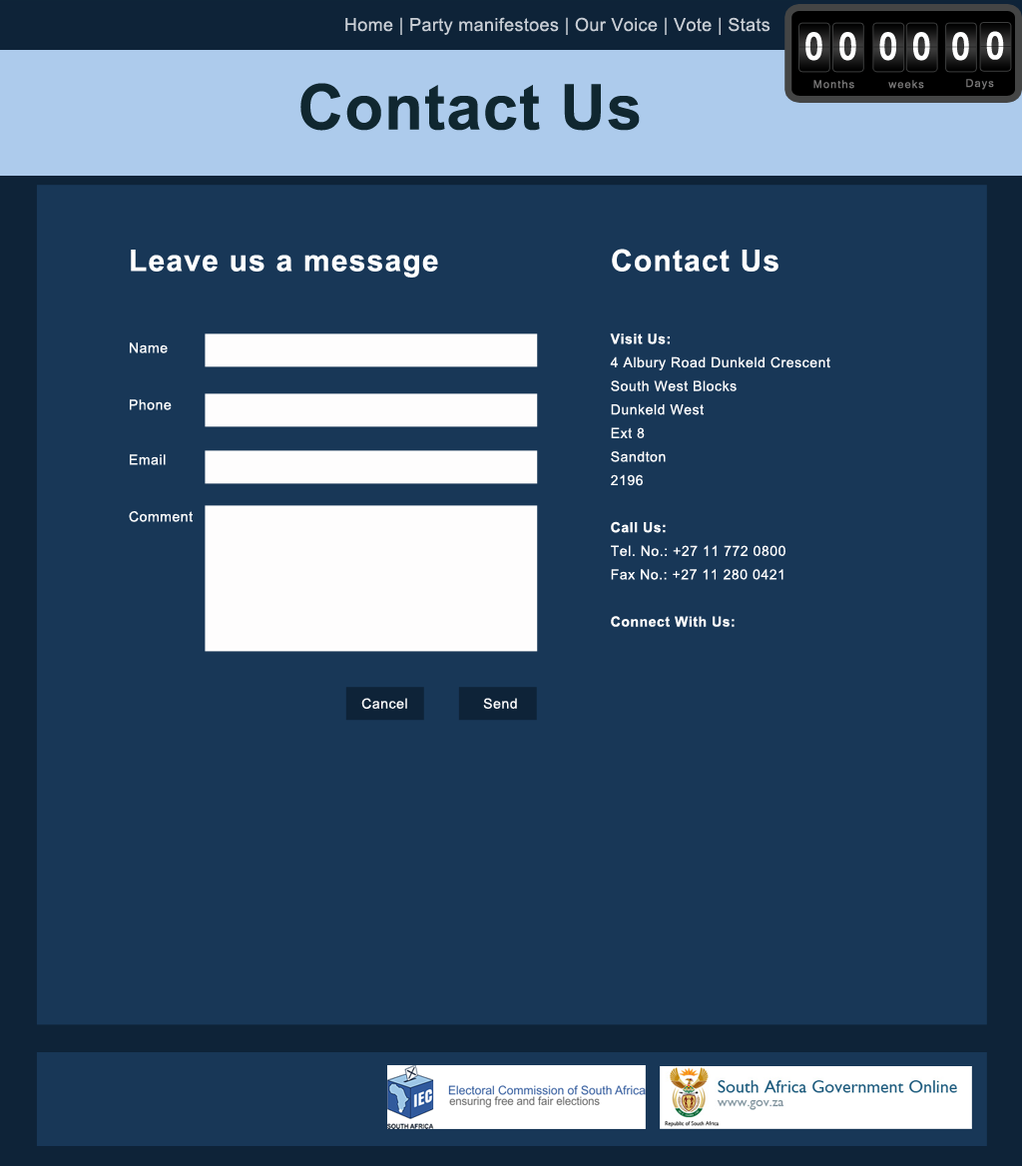
<style>
.page{position:relative;width:1022px;height:1166px;background:#183757}
.page>*{position:absolute;margin:0}
.t1{font:18px "ArialMT";letter-spacing:0.02em;color:#c9ced5}
.t2{font:37.6px "Kartika-Bold";letter-spacing:0.105em;color:#ffffff;scale:0.88 1}
.t3{font:63.1px "Arial-BoldMT";letter-spacing:0.02em;color:#102730}
.t4{font:10.5px "Kartika";letter-spacing:0.105em;color:#777676}
.t5{font:30px "Arial-BoldMT";letter-spacing:0.04em;color:#ffffff}
.t6{font:14px/23.6px "ArialMT";letter-spacing:0.04em;color:#fefdfd}
.t7{font:14px/23.6px "Arial-BoldMT";letter-spacing:0.04em;color:#fefdfd}
.t8{font:14px "ArialMT";letter-spacing:0.04em;color:#ffffff}
.t9{font:14px "ArialMT";letter-spacing:0.04em;color:#fefdfd}
</style>
<div class="page">
<p class="t1" style="left:345px;top:17px;width:426px;height:18px">Home | Party manifestoes | Our Voice | Vote | Stats</p>
<p class="t2" style="left:806px;top:32px;width:17px;height:29px">0</p>
<p class="t2" style="left:840px;top:32px;width:17px;height:29px">0</p>
<p class="t2" style="left:880px;top:32px;width:17px;height:29px">0</p>
<p class="t2" style="left:914px;top:32px;width:17px;height:29px">0</p>
<p class="t2" style="left:953px;top:32px;width:17px;height:29px">0</p>
<p class="t2" style="left:987px;top:31px;width:17px;height:29px">0</p>
<p class="t3" style="left:301px;top:83px;width:339px;height:48px">Contact Us</p>
<p class="t4" style="left:814px;top:80px;width:41px;height:9px">Months</p>
<p class="t4" style="left:889px;top:80px;width:36px;height:9px">weeks</p>
<p class="t4" style="left:967px;top:79px;width:28px;height:11px">Days</p>
<p class="t5" style="left:131px;top:250px;width:307px;height:28px">Leave us a message</p>
<p class="t5" style="left:612px;top:249px;width:167px;height:23px">Contact Us</p>
<p class="t6" style="left:610px;top:333px;width:221px;height:294px"><span class="t7">Visit Us:<br></span>4 Albury Road Dunkeld Crescent<br>South West Blocks<br>Dunkeld West<br>Ext 8<br>Sandton<br>2196<br><br><span class="t7">Call Us:<br></span>Tel. No.: +27 11 772 0800<br>Fax No.: +27 11 280 0421<br><br><span class="t7">Connect With Us:</span></p>
<p class="t8" style="left:130px;top:342px;width:38px;height:11px">Name</p>
<p class="t8" style="left:130px;top:399px;width:42px;height:11px">Phone</p>
<p class="t8" style="left:130px;top:454px;width:36px;height:11px">Email</p>
<p class="t8" style="left:129px;top:511px;width:64px;height:11px">Comment</p>
<p class="t9" style="left:361px;top:698px;width:46px;height:11px">Cancel</p>
<p class="t9" style="left:483px;top:698px;width:34px;height:11px">Send</p>
</div>
